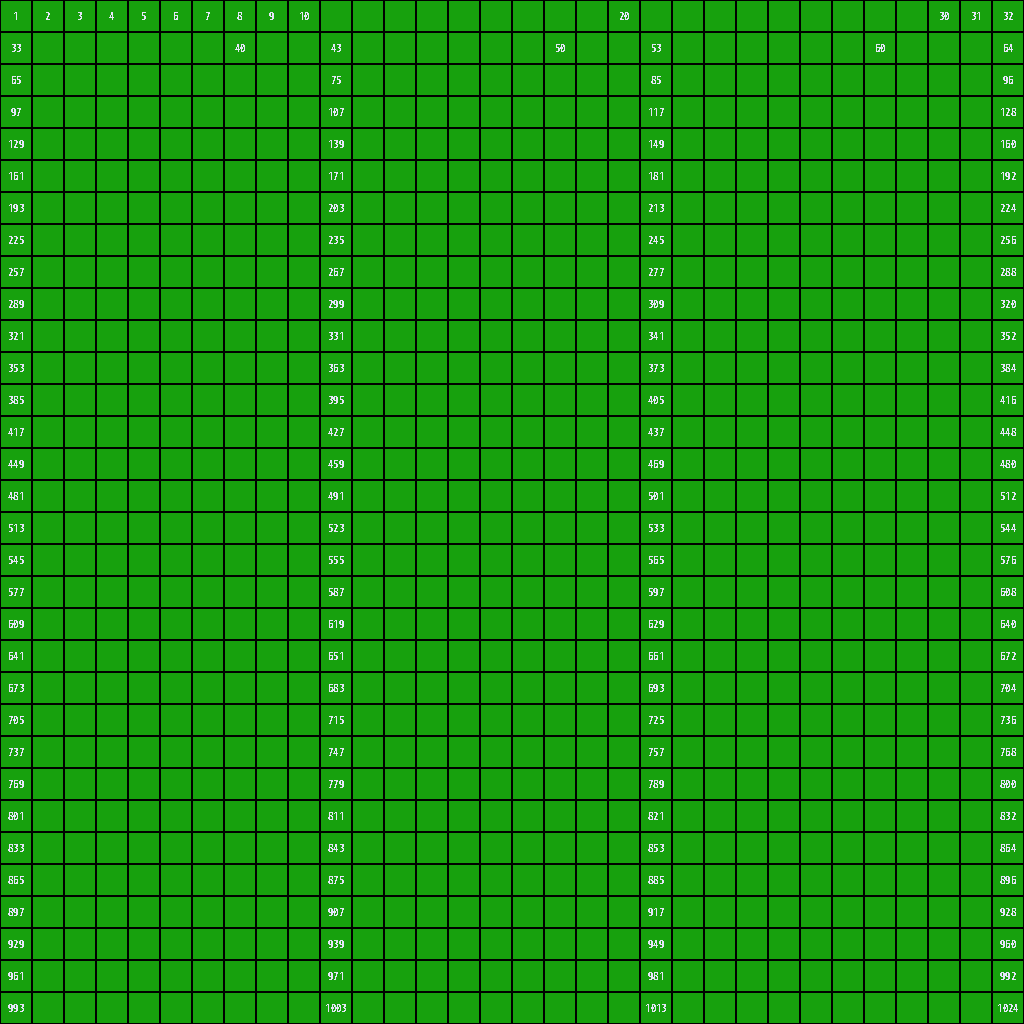
<style>
.page{position:relative;width:1024px;height:1024px;background:#17a10d}
.page>*{position:absolute;margin:0}
.t1{font:10.7px "mplus-1mn-bold";color:#e5e4f8}
</style>
<div class="page">
<p class="t1" style="left:14px;top:12px;width:3px;height:8px">1</p>
<p class="t1" style="left:46px;top:12px;width:4px;height:8px">2</p>
<p class="t1" style="left:78px;top:12px;width:4px;height:8px">3</p>
<p class="t1" style="left:109px;top:12px;width:5px;height:8px">4</p>
<p class="t1" style="left:142px;top:12px;width:4px;height:8px">5</p>
<p class="t1" style="left:174px;top:12px;width:4px;height:8px">6</p>
<p class="t1" style="left:206px;top:12px;width:4px;height:8px">7</p>
<p class="t1" style="left:237px;top:12px;width:5px;height:8px">8</p>
<p class="t1" style="left:269px;top:12px;width:5px;height:8px">9</p>
<p class="t1" style="left:300px;top:12px;width:9px;height:8px">10</p>
<p class="t1" style="left:620px;top:12px;width:9px;height:8px">20</p>
<p class="t1" style="left:940px;top:12px;width:9px;height:8px">30</p>
<p class="t1" style="left:972px;top:12px;width:8px;height:8px">31</p>
<p class="t1" style="left:1004px;top:12px;width:9px;height:8px">32</p>
<p class="t1" style="left:12px;top:44px;width:9px;height:8px">33</p>
<p class="t1" style="left:235px;top:44px;width:10px;height:8px">40</p>
<p class="t1" style="left:331px;top:44px;width:10px;height:8px">43</p>
<p class="t1" style="left:556px;top:44px;width:9px;height:8px">50</p>
<p class="t1" style="left:652px;top:44px;width:9px;height:8px">53</p>
<p class="t1" style="left:876px;top:44px;width:9px;height:8px">60</p>
<p class="t1" style="left:1004px;top:44px;width:9px;height:8px">64</p>
<p class="t1" style="left:12px;top:76px;width:9px;height:8px">65</p>
<p class="t1" style="left:332px;top:76px;width:9px;height:8px">75</p>
<p class="t1" style="left:651px;top:76px;width:10px;height:8px">85</p>
<p class="t1" style="left:1003px;top:76px;width:10px;height:8px">96</p>
<p class="t1" style="left:11px;top:108px;width:10px;height:8px">97</p>
<p class="t1" style="left:329px;top:108px;width:15px;height:8px">107</p>
<p class="t1" style="left:649px;top:108px;width:15px;height:8px">117</p>
<p class="t1" style="left:1001px;top:108px;width:15px;height:8px">128</p>
<p class="t1" style="left:9px;top:140px;width:15px;height:8px">129</p>
<p class="t1" style="left:329px;top:140px;width:15px;height:8px">139</p>
<p class="t1" style="left:649px;top:140px;width:15px;height:8px">149</p>
<p class="t1" style="left:1001px;top:140px;width:15px;height:8px">160</p>
<p class="t1" style="left:9px;top:172px;width:14px;height:8px">161</p>
<p class="t1" style="left:329px;top:172px;width:14px;height:8px">171</p>
<p class="t1" style="left:649px;top:172px;width:14px;height:8px">181</p>
<p class="t1" style="left:1001px;top:172px;width:15px;height:8px">192</p>
<p class="t1" style="left:9px;top:204px;width:15px;height:8px">193</p>
<p class="t1" style="left:329px;top:204px;width:15px;height:8px">203</p>
<p class="t1" style="left:649px;top:204px;width:15px;height:8px">213</p>
<p class="t1" style="left:1001px;top:204px;width:15px;height:8px">224</p>
<p class="t1" style="left:9px;top:236px;width:15px;height:8px">225</p>
<p class="t1" style="left:329px;top:236px;width:15px;height:8px">235</p>
<p class="t1" style="left:649px;top:236px;width:15px;height:8px">245</p>
<p class="t1" style="left:1001px;top:236px;width:15px;height:8px">256</p>
<p class="t1" style="left:9px;top:268px;width:15px;height:8px">257</p>
<p class="t1" style="left:329px;top:268px;width:15px;height:8px">267</p>
<p class="t1" style="left:649px;top:268px;width:15px;height:8px">277</p>
<p class="t1" style="left:1001px;top:268px;width:15px;height:8px">288</p>
<p class="t1" style="left:9px;top:300px;width:15px;height:8px">289</p>
<p class="t1" style="left:329px;top:300px;width:15px;height:8px">299</p>
<p class="t1" style="left:649px;top:300px;width:15px;height:8px">309</p>
<p class="t1" style="left:1001px;top:300px;width:15px;height:8px">320</p>
<p class="t1" style="left:9px;top:332px;width:14px;height:8px">321</p>
<p class="t1" style="left:329px;top:332px;width:14px;height:8px">331</p>
<p class="t1" style="left:649px;top:332px;width:14px;height:8px">341</p>
<p class="t1" style="left:1001px;top:332px;width:15px;height:8px">352</p>
<p class="t1" style="left:9px;top:364px;width:15px;height:8px">353</p>
<p class="t1" style="left:329px;top:364px;width:15px;height:8px">363</p>
<p class="t1" style="left:649px;top:364px;width:15px;height:8px">373</p>
<p class="t1" style="left:1001px;top:364px;width:15px;height:8px">384</p>
<p class="t1" style="left:9px;top:396px;width:15px;height:8px">385</p>
<p class="t1" style="left:329px;top:396px;width:15px;height:8px">395</p>
<p class="t1" style="left:648px;top:396px;width:16px;height:8px">405</p>
<p class="t1" style="left:1000px;top:396px;width:16px;height:8px">416</p>
<p class="t1" style="left:8px;top:428px;width:16px;height:8px">417</p>
<p class="t1" style="left:328px;top:428px;width:16px;height:8px">427</p>
<p class="t1" style="left:648px;top:428px;width:16px;height:8px">437</p>
<p class="t1" style="left:1000px;top:428px;width:16px;height:8px">448</p>
<p class="t1" style="left:8px;top:460px;width:16px;height:8px">449</p>
<p class="t1" style="left:328px;top:460px;width:16px;height:8px">459</p>
<p class="t1" style="left:648px;top:460px;width:16px;height:8px">469</p>
<p class="t1" style="left:1000px;top:460px;width:16px;height:8px">480</p>
<p class="t1" style="left:8px;top:492px;width:15px;height:8px">481</p>
<p class="t1" style="left:328px;top:492px;width:15px;height:8px">491</p>
<p class="t1" style="left:649px;top:492px;width:14px;height:8px">501</p>
<p class="t1" style="left:1001px;top:492px;width:15px;height:8px">512</p>
<p class="t1" style="left:9px;top:524px;width:15px;height:8px">513</p>
<p class="t1" style="left:329px;top:524px;width:15px;height:8px">523</p>
<p class="t1" style="left:649px;top:524px;width:15px;height:8px">533</p>
<p class="t1" style="left:1001px;top:524px;width:15px;height:8px">544</p>
<p class="t1" style="left:9px;top:556px;width:15px;height:8px">545</p>
<p class="t1" style="left:329px;top:556px;width:15px;height:8px">555</p>
<p class="t1" style="left:649px;top:556px;width:15px;height:8px">565</p>
<p class="t1" style="left:1001px;top:556px;width:15px;height:8px">576</p>
<p class="t1" style="left:9px;top:588px;width:15px;height:8px">577</p>
<p class="t1" style="left:329px;top:588px;width:15px;height:8px">587</p>
<p class="t1" style="left:649px;top:588px;width:15px;height:8px">597</p>
<p class="t1" style="left:1001px;top:588px;width:15px;height:8px">608</p>
<p class="t1" style="left:9px;top:620px;width:15px;height:8px">609</p>
<p class="t1" style="left:329px;top:620px;width:15px;height:8px">619</p>
<p class="t1" style="left:649px;top:620px;width:15px;height:8px">629</p>
<p class="t1" style="left:1001px;top:620px;width:15px;height:8px">640</p>
<p class="t1" style="left:9px;top:652px;width:14px;height:8px">641</p>
<p class="t1" style="left:329px;top:652px;width:14px;height:8px">651</p>
<p class="t1" style="left:649px;top:652px;width:14px;height:8px">661</p>
<p class="t1" style="left:1001px;top:652px;width:15px;height:8px">672</p>
<p class="t1" style="left:9px;top:684px;width:15px;height:8px">673</p>
<p class="t1" style="left:329px;top:684px;width:15px;height:8px">683</p>
<p class="t1" style="left:649px;top:684px;width:15px;height:8px">693</p>
<p class="t1" style="left:1001px;top:684px;width:15px;height:8px">704</p>
<p class="t1" style="left:9px;top:716px;width:15px;height:8px">705</p>
<p class="t1" style="left:329px;top:716px;width:15px;height:8px">715</p>
<p class="t1" style="left:649px;top:716px;width:15px;height:8px">725</p>
<p class="t1" style="left:1001px;top:716px;width:15px;height:8px">736</p>
<p class="t1" style="left:9px;top:748px;width:15px;height:8px">737</p>
<p class="t1" style="left:329px;top:748px;width:15px;height:8px">747</p>
<p class="t1" style="left:649px;top:748px;width:15px;height:8px">757</p>
<p class="t1" style="left:1001px;top:748px;width:15px;height:8px">768</p>
<p class="t1" style="left:9px;top:780px;width:15px;height:8px">769</p>
<p class="t1" style="left:329px;top:780px;width:15px;height:8px">779</p>
<p class="t1" style="left:649px;top:780px;width:15px;height:8px">789</p>
<p class="t1" style="left:1000px;top:780px;width:16px;height:8px">800</p>
<p class="t1" style="left:8px;top:812px;width:15px;height:8px">801</p>
<p class="t1" style="left:328px;top:812px;width:15px;height:8px">811</p>
<p class="t1" style="left:648px;top:812px;width:15px;height:8px">821</p>
<p class="t1" style="left:1000px;top:812px;width:16px;height:8px">832</p>
<p class="t1" style="left:8px;top:844px;width:16px;height:8px">833</p>
<p class="t1" style="left:328px;top:844px;width:16px;height:8px">843</p>
<p class="t1" style="left:648px;top:844px;width:16px;height:8px">853</p>
<p class="t1" style="left:1000px;top:844px;width:16px;height:8px">864</p>
<p class="t1" style="left:8px;top:876px;width:16px;height:8px">865</p>
<p class="t1" style="left:328px;top:876px;width:16px;height:8px">875</p>
<p class="t1" style="left:648px;top:876px;width:16px;height:8px">885</p>
<p class="t1" style="left:1000px;top:876px;width:16px;height:8px">896</p>
<p class="t1" style="left:8px;top:908px;width:16px;height:8px">897</p>
<p class="t1" style="left:328px;top:908px;width:16px;height:8px">907</p>
<p class="t1" style="left:648px;top:908px;width:16px;height:8px">917</p>
<p class="t1" style="left:1000px;top:908px;width:16px;height:8px">928</p>
<p class="t1" style="left:8px;top:940px;width:16px;height:8px">929</p>
<p class="t1" style="left:328px;top:940px;width:16px;height:8px">939</p>
<p class="t1" style="left:648px;top:940px;width:16px;height:8px">949</p>
<p class="t1" style="left:1000px;top:940px;width:16px;height:8px">960</p>
<p class="t1" style="left:8px;top:972px;width:15px;height:8px">961</p>
<p class="t1" style="left:328px;top:972px;width:15px;height:8px">971</p>
<p class="t1" style="left:648px;top:972px;width:15px;height:8px">981</p>
<p class="t1" style="left:1000px;top:972px;width:16px;height:8px">992</p>
<p class="t1" style="left:8px;top:1004px;width:16px;height:8px">993</p>
<p class="t1" style="left:326px;top:1004px;width:20px;height:8px">1003</p>
<p class="t1" style="left:646px;top:1004px;width:20px;height:8px">1013</p>
<p class="t1" style="left:998px;top:1004px;width:20px;height:8px">1024</p>
</div>
